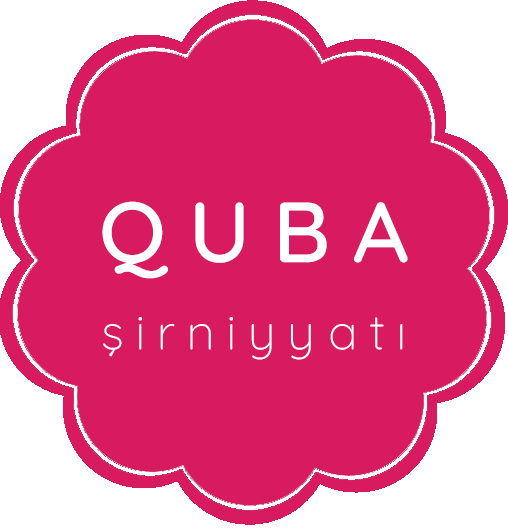
<style>
.page{position:relative;width:508px;height:529px;background:#d81b60}
.page>*{position:absolute;margin:0}
.t1{font:85.3px "Quicksand-Medium";letter-spacing:0.25em;color:#ffffff;scale:1.04 1}
.t2{font:49.5px "Quicksand-Light";letter-spacing:0.23em;color:#ffffff}
</style>
<div class="page">
<p class="t1" style="left:102px;top:201px;width:306px;height:78px">QUBA</p>
<p class="t2" style="left:103px;top:317px;width:300px;height:43px">şirniyyatı</p>
</div>
